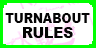
<style>
.page{position:relative;width:96px;height:48px;background:#ffffff}
.page>*{position:absolute;margin:0}
.t1{font:14px "Arial-Black";color:#050505;scale:0.86 1}
.t2{font:15.5px "Arial-Black";color:#050505;scale:0.89 1}
</style>
<div class="page">
<p class="t1" style="left:5px;top:13px;width:85px;height:10px">TURNABOUT</p>
<p class="t2" style="left:23px;top:27px;width:50px;height:11px">RULES</p>
</div>
